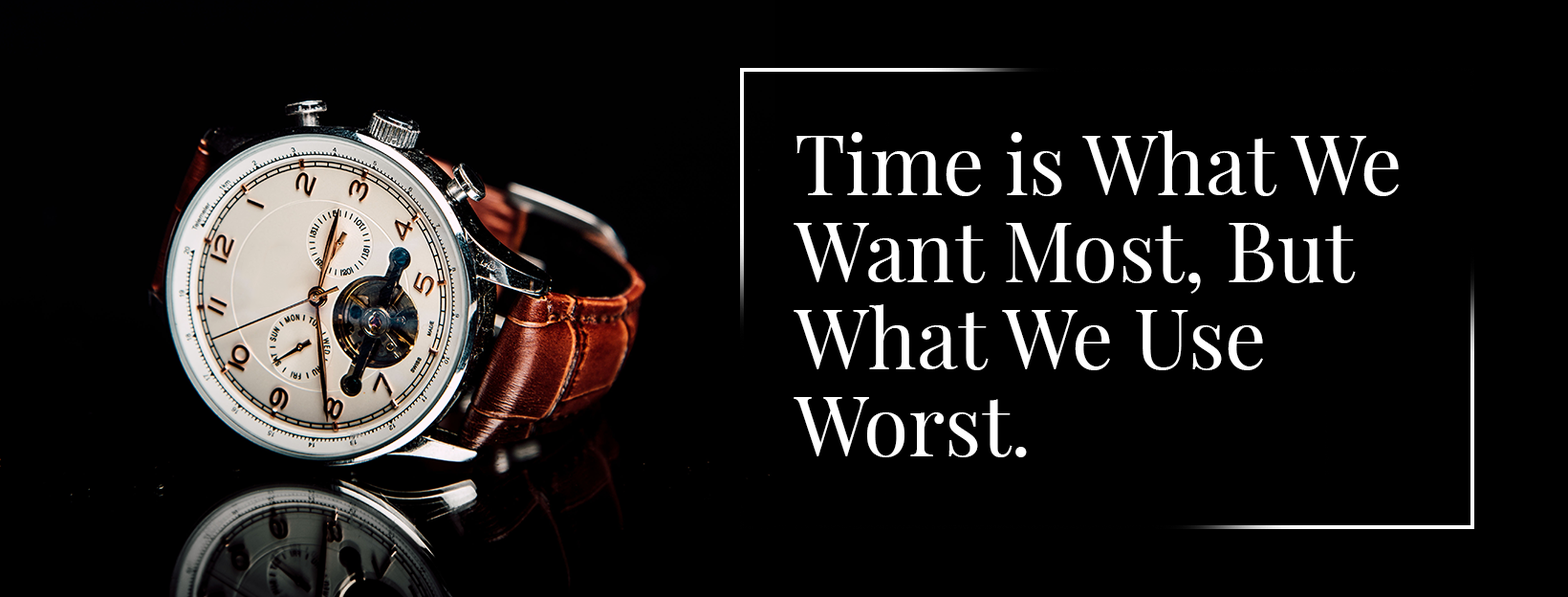
<style>
.page{position:relative;width:1568px;height:597px;background:#000000}
.page>*{position:absolute;margin:0}
.t1{font:82.2px/87px "PlayfairDisplay-Regular";color:#ffffff}
</style>
<div class="page">
<p class="t1" style="left:794px;top:130px;width:605px;height:327px">Time is What We<br>Want Most, But<br>What We Use<br>Worst.</p>
</div>
